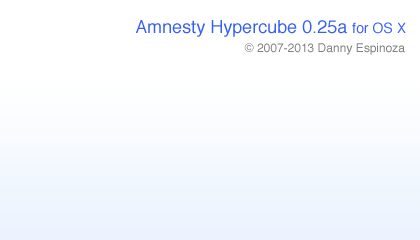
<style>
.page{position:relative;width:420px;height:240px;background:#ffffff}
.page>*{position:absolute;margin:0}
.t1{font:18px "Helvetica";color:#375ff3}
.t2{font:14px "Helvetica";color:#375ff3}
.t3{font:12px "Helvetica";color:#808080}
</style>
<div class="page">
<p class="t1" style="left:135px;top:20px;width:271px;height:17px">Amnesty Hypercube 0.25a <span class="t2">for OS X</span></p>
<p class="t3" style="left:244px;top:43px;width:161px;height:12px">© 2007-2013 Danny Espinoza</p>
</div>
